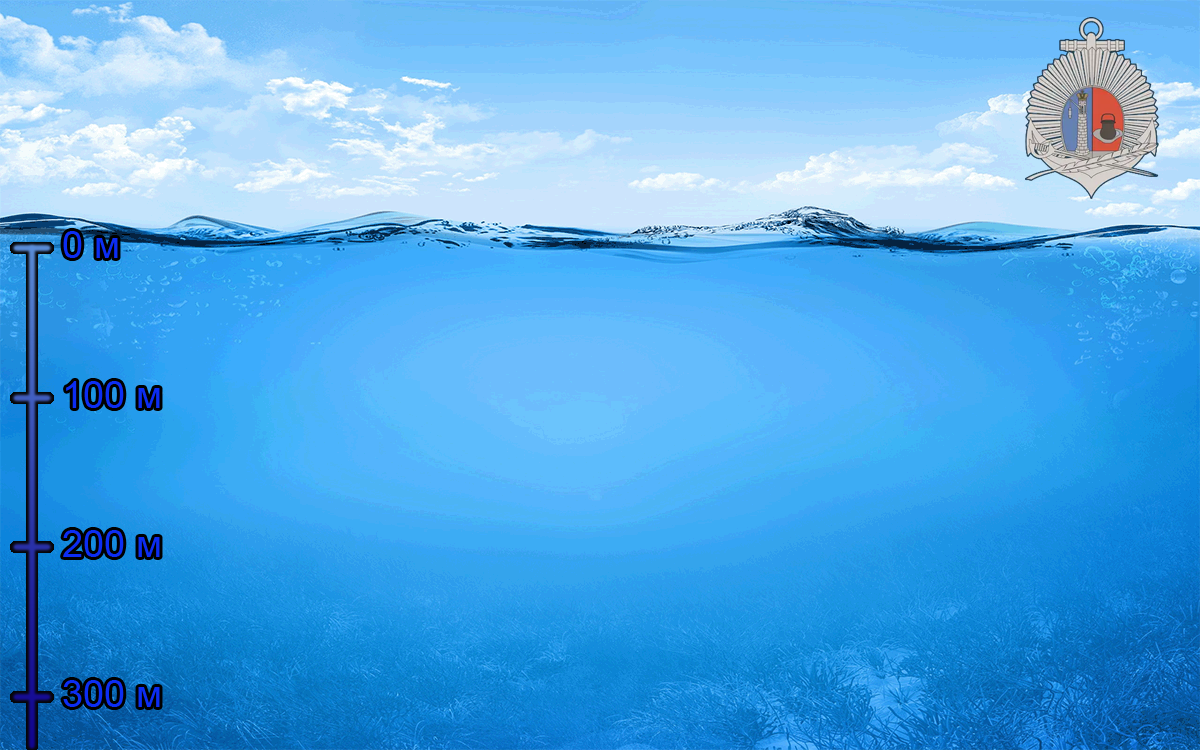
<style>
.page{position:relative;width:1200px;height:750px}
.page>*{position:absolute;margin:0}
.t1{font:38px "ArialMT";color:#0c2df4}
</style>
<div class="page">
<p class="t1" style="left:63px;top:231px;width:55px;height:27px">0 м</p>
<p class="t1" style="left:66px;top:381px;width:94px;height:27px">100 м</p>
<p class="t1" style="left:63px;top:530px;width:97px;height:27px">200 м</p>
<p class="t1" style="left:63px;top:680px;width:97px;height:27px">300 м</p>
</div>
